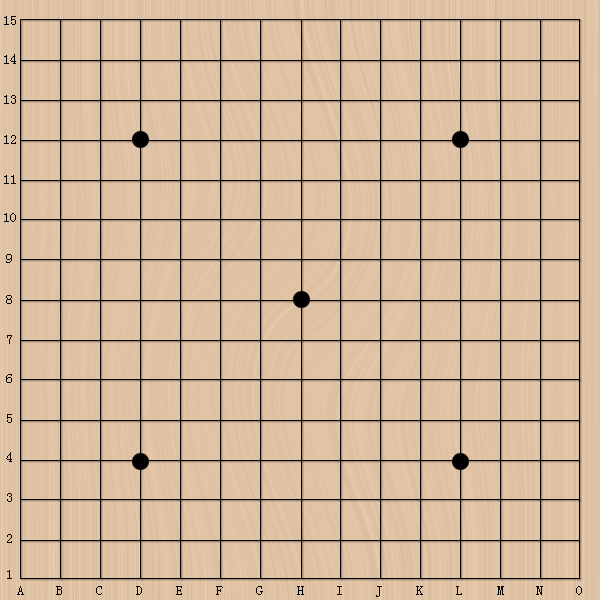
<style>
.page{position:relative;width:600px;height:600px}
.page>*{position:absolute;margin:0}
.t1{font:13.9px "SimSun";color:#000000}
</style>
<div class="page">
<p class="t1" style="left:4px;top:16px;width:12px;height:9px">15</p>
<p class="t1" style="left:4px;top:54px;width:12px;height:10px">14</p>
<p class="t1" style="left:4px;top:95px;width:12px;height:9px">13</p>
<p class="t1" style="left:4px;top:135px;width:12px;height:9px">12</p>
<p class="t1" style="left:4px;top:175px;width:12px;height:9px">11</p>
<p class="t1" style="left:4px;top:213px;width:12px;height:9px">10</p>
<p class="t1" style="left:6px;top:254px;width:6px;height:9px">9</p>
<p class="t1" style="left:6px;top:295px;width:6px;height:9px">8</p>
<p class="t1" style="left:7px;top:335px;width:5px;height:9px">7</p>
<p class="t1" style="left:6px;top:374px;width:6px;height:9px">6</p>
<p class="t1" style="left:7px;top:414px;width:5px;height:9px">5</p>
<p class="t1" style="left:6px;top:452px;width:6px;height:10px">4</p>
<p class="t1" style="left:7px;top:493px;width:5px;height:9px">3</p>
<p class="t1" style="left:7px;top:534px;width:5px;height:9px">2</p>
<p class="t1" style="left:7px;top:570px;width:5px;height:9px">1</p>
<p class="t1" style="left:17px;top:586px;width:7px;height:9px">A</p>
<p class="t1" style="left:56px;top:586px;width:6px;height:9px">B</p>
<p class="t1" style="left:96px;top:586px;width:6px;height:9px">C</p>
<p class="t1" style="left:136px;top:586px;width:6px;height:9px">D</p>
<p class="t1" style="left:176px;top:586px;width:6px;height:9px">E</p>
<p class="t1" style="left:216px;top:586px;width:7px;height:9px">F</p>
<p class="t1" style="left:256px;top:586px;width:7px;height:9px">G</p>
<p class="t1" style="left:297px;top:586px;width:7px;height:9px">H</p>
<p class="t1" style="left:337px;top:586px;width:5px;height:9px">I</p>
<p class="t1" style="left:376px;top:586px;width:6px;height:11px">J</p>
<p class="t1" style="left:416px;top:586px;width:7px;height:9px">K</p>
<p class="t1" style="left:456px;top:586px;width:6px;height:9px">L</p>
<p class="t1" style="left:497px;top:586px;width:7px;height:9px">M</p>
<p class="t1" style="left:536px;top:586px;width:7px;height:9px">N</p>
<p class="t1" style="left:576px;top:586px;width:6px;height:9px">O</p>
</div>
